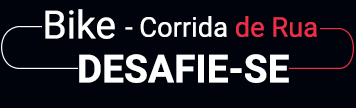
<style>
.page{position:relative;width:356px;height:108px;background:#00030c}
.page>*{position:absolute;margin:0}
.t1{font:38.9px "Roboto-Regular";color:#ffffff}
.t2{font:27.3px "Roboto-Regular";color:#ffffff}
.t3{font:27.3px "Roboto-Regular";color:#ec2f46}
.t4{font:38.9px "Roboto-Bold";color:#ffffff}
</style>
<div class="page">
<p class="t1" style="left:45px;top:9px;width:70px;height:30px">Bike</p>
<p class="t2" style="left:125px;top:16px;width:192px;height:21px">- Corrida <span class="t3">de Rua</span></p>
<p class="t4" style="left:79px;top:54px;width:210px;height:29px">DESAFIE-SE</p>
</div>
